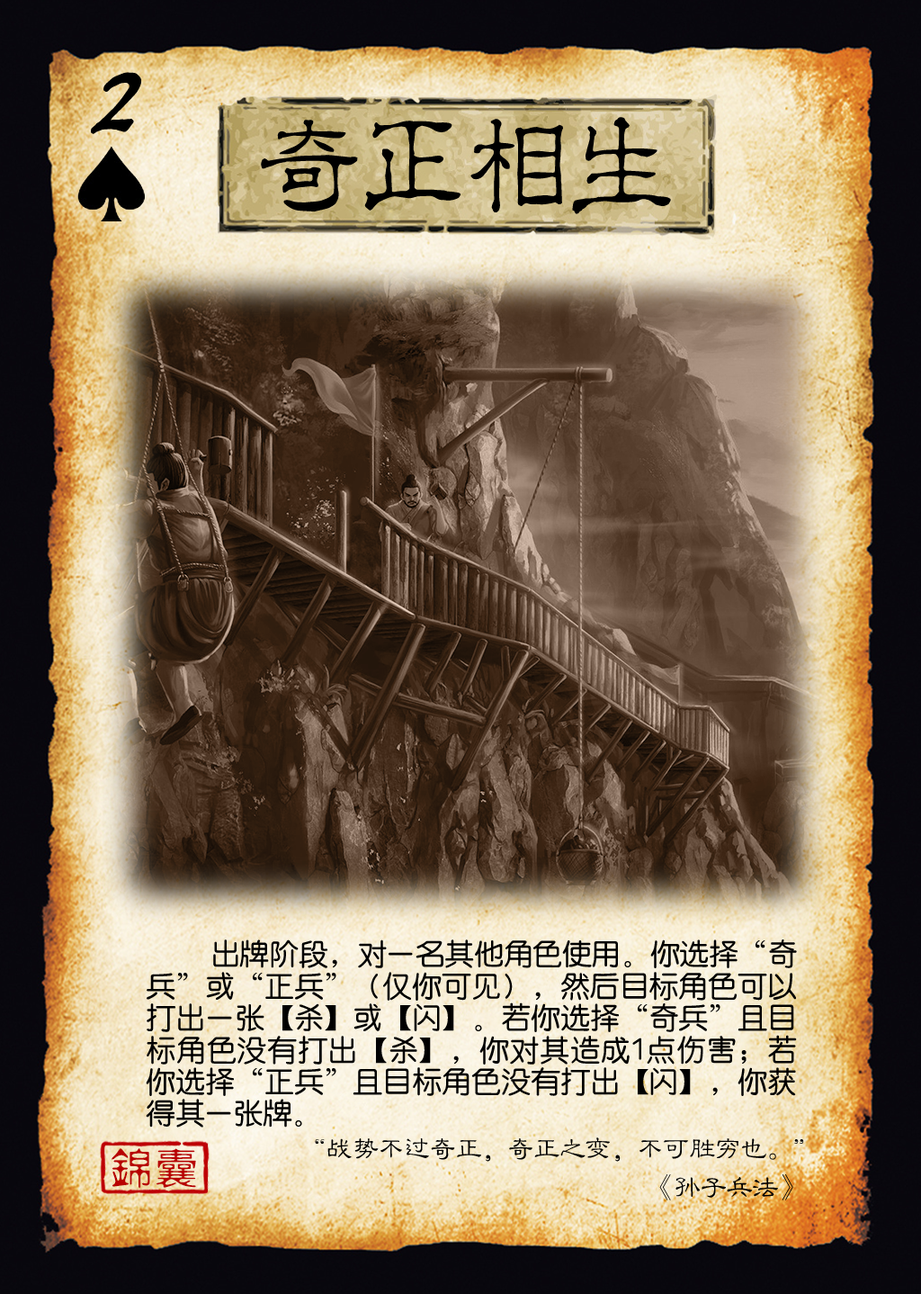
<style>
.page{position:relative;width:921px;height:1294px}
.page>*{position:absolute;margin:0}
.t1{font:110.9px "HYi1gf";color:#000000;font-weight:bold;font-style:italic}
.t2{font:113.1px "¾­µä·±½ÇÁ¥ Regular";letter-spacing:-0.08em;color:#000000}
.t3{font:30px/31.9px "HYe3gj";letter-spacing:-0.03em;color:#000000}
.t4{font:27.3px "FZLBK--GBK1-0";letter-spacing:-0.05em;color:#000000}
.t5{font:41.4px "FZXSHFW--GB1-0";letter-spacing:0.08em;color:#b80000}
</style>
<div class="page">
<p class="t1" style="left:91px;top:72px;width:50px;height:62px">2</p>
<p class="t2" style="left:261px;top:117px;width:410px;height:97px">奇正相生</p>
<p class="t3" style="left:146px;top:939px;width:651px;height:189px;text-align:justify">出牌阶段，对一名其他角色使用。你选择“奇兵”或“正兵”（仅你可见），然后目标角色可以打出一张【杀】或【闪】。若你选择“奇兵”且目标角色没有打出【杀】，你对其造成1点伤害；若你选择“正兵”且目标角色没有打出【闪】，你获得其一张牌。</p>
<p class="t4" style="left:315px;top:1137px;width:489px;height:25px">“战势不过奇正，奇正之变，不可胜穷也。”</p>
<p class="t5" style="left:112px;top:1148px;width:84px;height:41px">锦囊</p>
<p class="t4" style="left:660px;top:1173px;width:134px;height:27px">《孙子兵法》</p>
</div>
